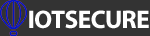
<style>
.page{position:relative;width:150px;height:36px;background:#333333}
.page>*{position:absolute;margin:0}
.t1{font:25.5px "MyriadPro-Bold";letter-spacing:-0.025em;color:#ffffff;text-transform:uppercase}
</style>
<div class="page">
<p class="t1" style="left:29px;top:10px;width:120px;height:19px">IOtsecure</p>
</div>
